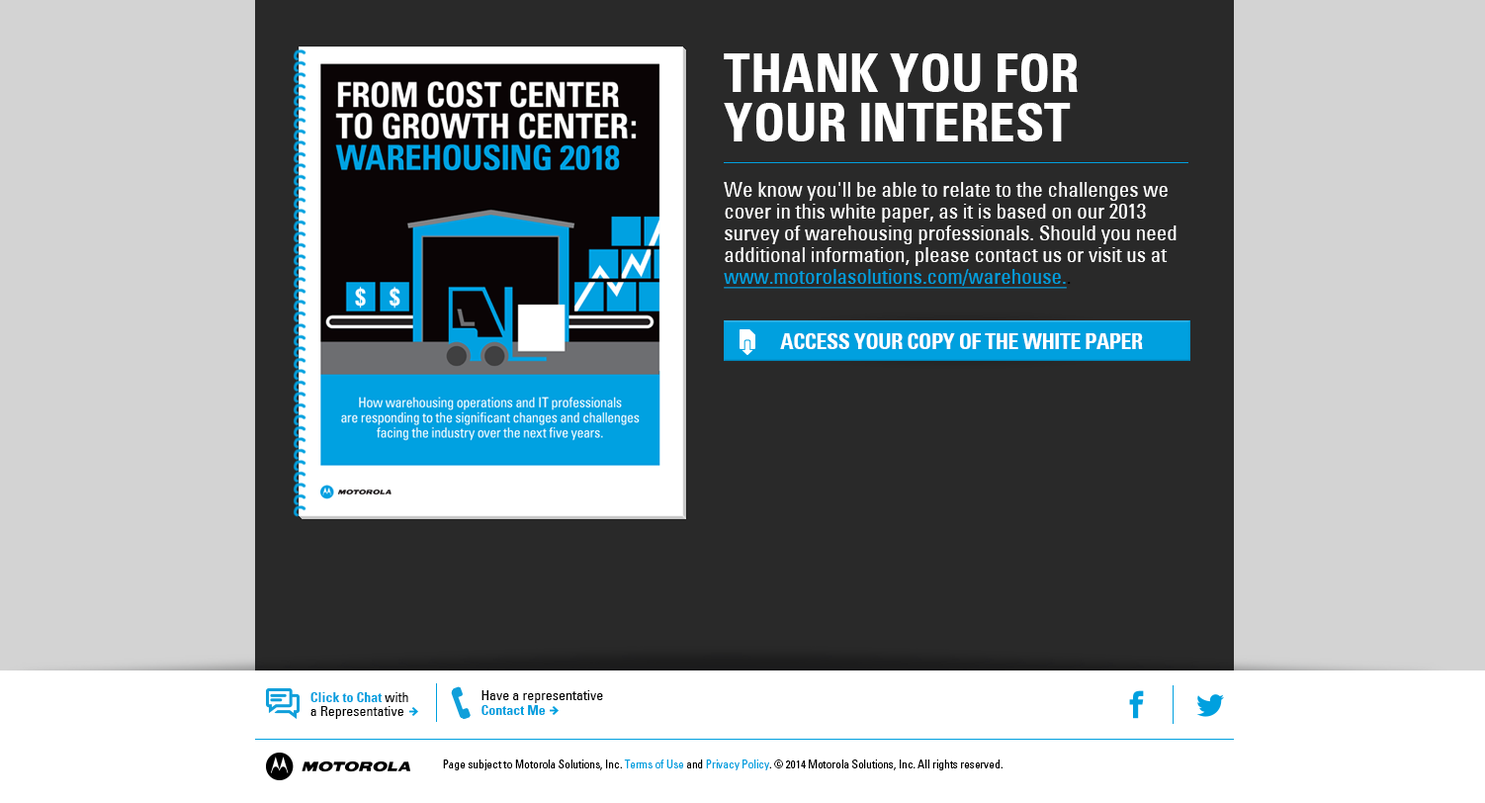
<style>
.page{position:relative;width:1485px;height:803px;background:#292929}
.page>*{position:absolute;margin:0}
.t1{font:52.4px/49.4px "UniversCondensedBold";color:#ffffff}
.t2{font:20.8px/21.8px "UniversCondensed";color:#ffffff}
.t3{font:20.8px/21.8px "UniversCondensed";color:#00a0df;text-decoration:underline}
.t4{font:20.8px/21.8px "UniversCondensed";color:#000000}
.t5{font:21.5px "UniversCondensedBold";letter-spacing:-0.02em;color:#ffffff;text-transform:uppercase}
.t6{font:13.8px/13.8px "UniversCondensed";color:#000000}
.t7{font:13.8px/13.8px "UniversCondensedBold";color:#00a0df}
.t8{font:13.8px/9px "UniversCondensed";color:#000000}
.t9{font:13.8px/9px "UniversCondensedBold";color:#00a0df}
.t10{font:11.2px "UniversLTStd-Cn";color:#000000}
.t11{font:11.2px "UniversLTStd-Cn";color:#00a0df}
</style>
<div class="page">
<p class="t1" style="left:724px;top:53px;width:354px;height:88px">THANK YOU FOR <br>YOUR INTEREST</p>
<p class="t2" style="left:724px;top:182px;width:453px;height:107px">We know you'll be able to relate to the challenges we cover in this white paper, as it is based on our 2013 survey of warehousing professionals. Should you need additional information, please contact us or visit us at <span class="t3">www.motorolasolutions.com/warehouse.</span><span class="t4">.</span></p>
<p class="t5" style="left:780px;top:333px;width:363px;height:16px">ACCESS YOUR COPY OF THE WHITE PAPER</p>
<p class="t6" style="left:310px;top:692px;width:98px;height:27px"><span class="t7">Click to Chat</span> with<br>a Representative</p>
<p class="t8" style="left:482px;top:690px;width:121px;height:25px">Have a representative<br><span class="t9">Contact Me</span></p>
<p class="t10" style="left:443px;top:759px;width:560px;height:11px">Page subject to Motorola Solutions, Inc. <span class="t11">Terms of Use </span>and <span class="t11">Privacy Policy</span>. © 2014 Motorola Solutions, Inc. All rights reserved.</p>
</div>
